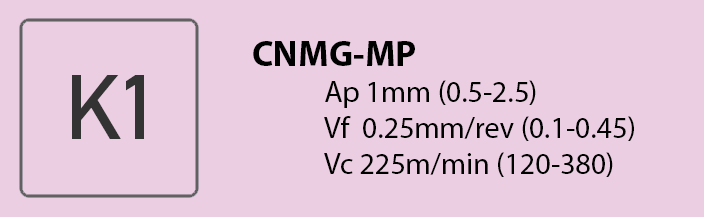
<style>
.page{position:relative;width:704px;height:217px;background:#ebcee2}
.page>*{position:absolute;margin:0}
.t1{font:30px "MyriadPro-Regular";color:#000000}
.t2{font:36px "MyriadPro-Bold";color:#000000}
</style>
<div class="page">
<p class="t1" style="left:253px;top:41px;width:381px;height:136px"><span class="t2">CNMG-MP<br></span>  Ap 1mm (0.5-2.5)<br>  Vf  0.25mm/rev (0.1-0.45)<br>  Vc 225m/min (120-380)</p>
</div>
